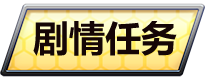
<style>
.page{position:relative;width:205px;height:78px}
.page>*{position:absolute;margin:0}
.t1{font:36px "MicrosoftYaHei";color:#150606}
</style>
<div class="page">
<p class="t1" style="left:33px;top:21px;width:144px;height:35px">剧情任务</p>
</div>
